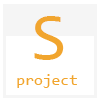
<style>
.page{position:relative;width:100px;height:100px;background:#ffffff}
.page>*{position:absolute;margin:0}
.t1{font:66.2px "Consolas";color:#f1a52e}
.t2{font:16px "Consolas";color:#f1a52e}
</style>
<div class="page">
<p class="t1" style="left:34px;top:16px;width:30px;height:44px">S</p>
<p class="t2" style="left:17px;top:74px;width:60px;height:14px">project</p>
</div>
